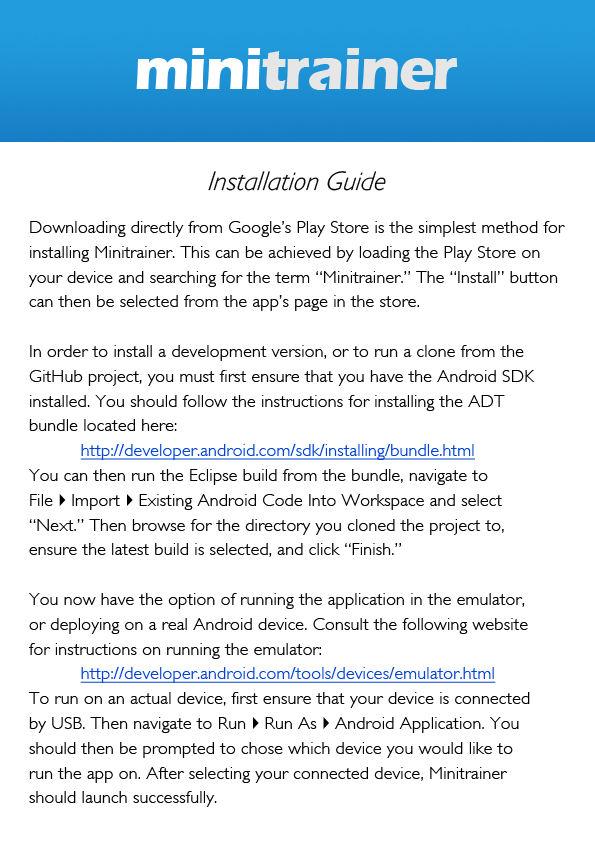
<style>
.page{position:relative;width:595px;height:842px;background:#ffffff}
.page>*{position:absolute;margin:0}
.t1{font:60px "ErasITC-Bold";letter-spacing:-0.03em;color:#e6e6e6}
.t2{font:60px "ErasITC-Bold";letter-spacing:-0.03em;color:#ffffff}
.t3{font:27px "GillSans-LightItalic";letter-spacing:0.01em;color:#000000;font-style:italic}
.t4{font:18px/24.8px "GillSans-Light";letter-spacing:0.01em;color:#000000}
.t5{font:18px/24.8px "GillSans-Light";letter-spacing:0.01em;color:#0041d5;text-decoration:underline}
.t6{font:18px/24.8px "Webdings";letter-spacing:0.01em;color:#000000}
</style>
<div class="page">
<p class="t1" style="left:136px;top:48px;width:322px;height:42px"><span class="t2">mini</span>trainer</p>
<p class="t3" style="left:208px;top:171px;width:178px;height:20px">Installation Guide</p>
<p class="t4" style="left:28px;top:221px;width:537px;height:586px">Downloading directly from Google’s Play Store is the simplest method for<br>installing Minitrainer. This can be achieved by loading the Play Store on<br>your device and searching for the term “Minitrainer.” The “Install” button<br>can then be selected from the app’s page in the store.<br><br>In order to install a development version, or to run a clone from the<br>GitHub project, you must first ensure that you have the Android SDK<br>installed. You should follow the instructions for installing the ADT<br>bundle located here:<br>          <span class="t5">http://developer.android.com/sdk/installing/bundle.html<br></span>You can then run the Eclipse build from the bundle, navigate to<br>File<span class="t6">4</span>Import<span class="t6">4</span>Existing Android Code Into Workspace and select<br>“Next.” Then browse for the directory you cloned the project to,<br>ensure the latest build is selected, and click “Finish.”<br><br>You now have the option of running the application in the emulator,<br>or deploying on a real Android device. Consult the following website<br>for instructions on running the emulator:<br>          <span class="t5">http://developer.android.com/tools/devices/emulator.html<br></span>To run on an actual device, first ensure that your device is connected<br>by USB. Then navigate to Run<span class="t6">4</span>Run As<span class="t6">4</span>Android Application. You <br>should then be prompted to chose which device you would like to<br>run the app on. After selecting your connected device, Minitrainer<br>should launch successfully.</p>
</div>
